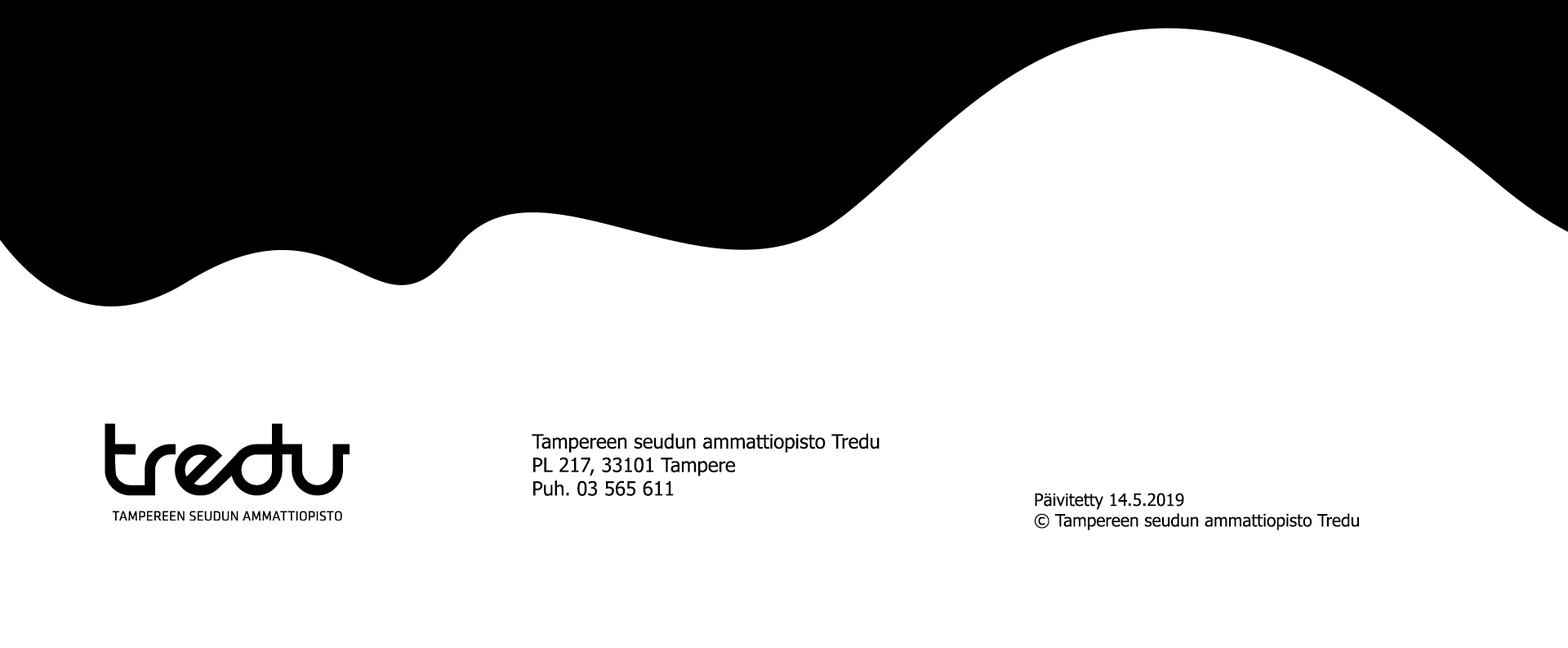
<style>
.page{position:relative;width:1568px;height:648px;background:#ffffff}
.page>*{position:absolute;margin:0}
.t1{font:19.6px "Tahoma";color:#000000}
.t2{font:17.1px "Tahoma";color:#000000}
</style>
<div class="page">
<p class="t1" style="left:532px;top:433px;width:348px;height:63px">Tampereen seudun ammattiopisto Tredu<br>PL 217, 33101 Tampere<br>Puh. 03 565 611</p>
<p class="t2" style="left:1034px;top:492px;width:325px;height:38px">Päivitetty 14.5.2019<br>© Tampereen seudun ammattiopisto Tredu</p>
</div>
